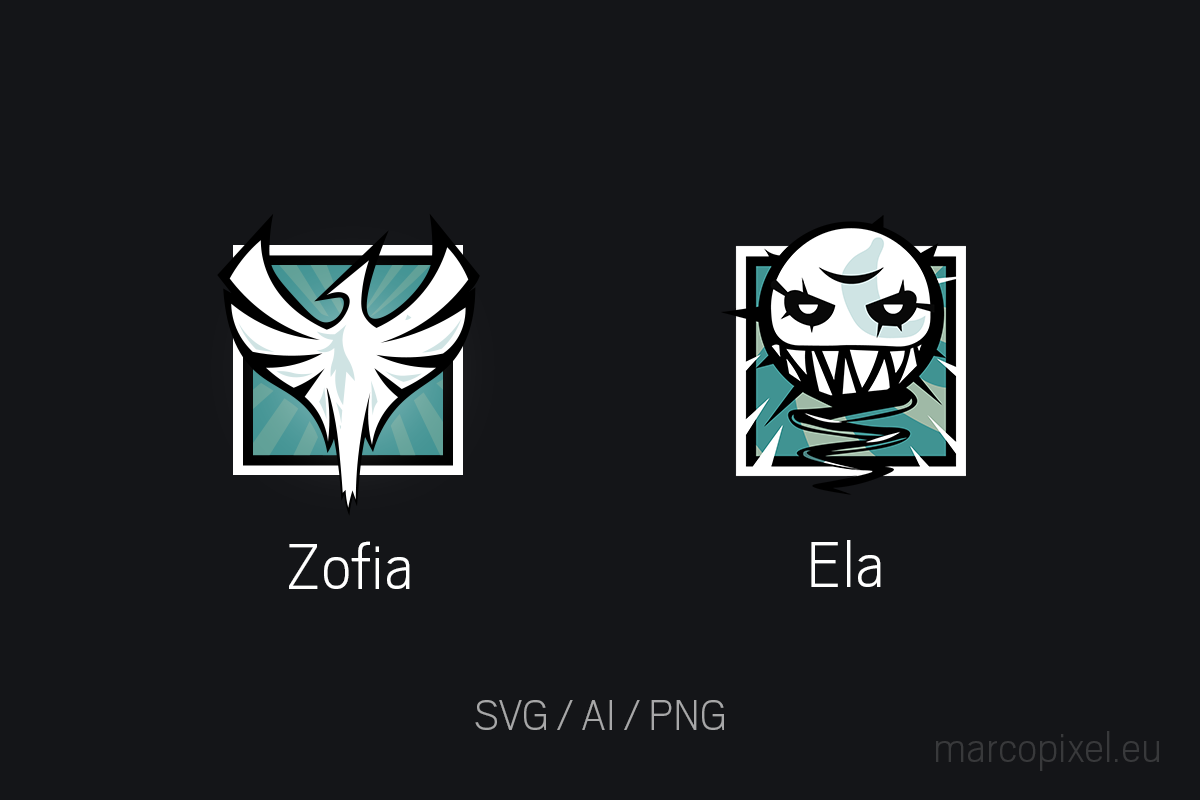
<style>
.page{position:relative;width:1200px;height:800px;background:#141518}
.page>*{position:absolute;margin:0}
.t1{font:72px "Scout-ExtraLight";color:#ffffff}
.t2{font:48px "Scout-ExtraLight";color:#a7a7a8}
.t3{font:48px "Scout-ExtraLight";color:#38393b}
</style>
<div class="page">
<p class="t1" style="left:289px;top:541px;width:121px;height:48px">Zofia</p>
<p class="t1" style="left:811px;top:540px;width:70px;height:47px">Ela</p>
<p class="t2" style="left:475px;top:700px;width:249px;height:30px">SVG / AI / PNG</p>
<p class="t3" style="left:936px;top:731px;width:223px;height:40px">marcopixel.eu</p>
</div>
